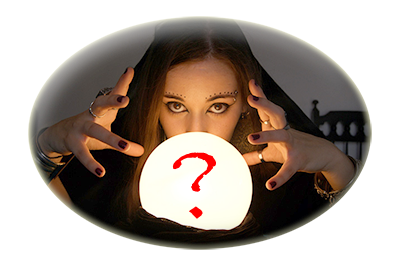
<style>
.page{position:relative;width:400px;height:267px;background:#ffffff}
.page>*{position:absolute;margin:0}
.t1{font:120px "Papyrus-Regular";color:#ff0000}
</style>
<div class="page">
<p class="t1" style="left:172px;top:152px;width:44px;height:67px">?</p>
</div>
